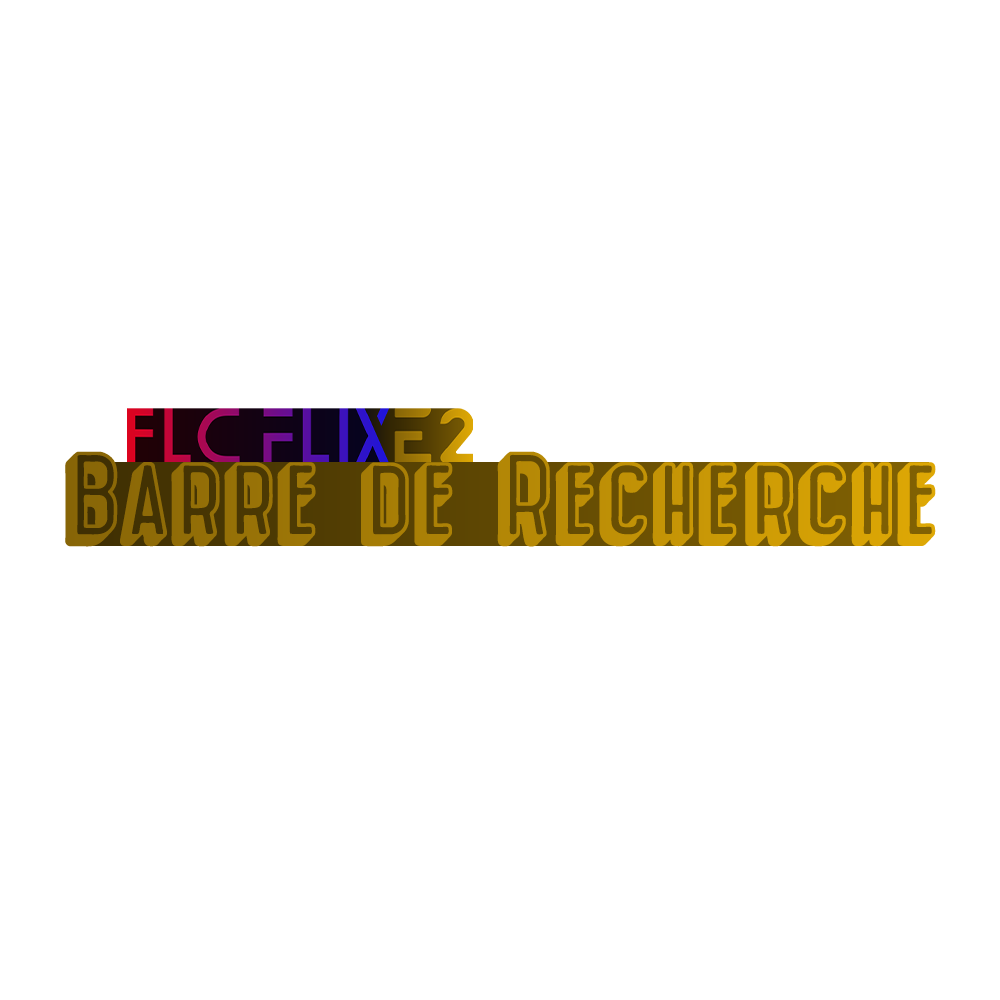
<style>
.page{position:relative;width:1000px;height:1000px;background:#ffffff}
.page>*{position:absolute;margin:0}
.t1{font:133.3px "Gallagher-Gallagher"}
</style>
<div class="page">
<p class="t1" style="left:65px;top:451px;width:871px;height:96px">Barre de Recherche</p>
</div>
